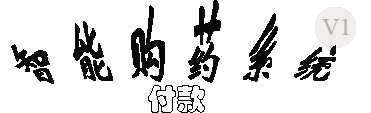
<style>
.page{position:relative;width:371px;height:113px;background:#ffffff}
.page>*{position:absolute;margin:0}
.t1{font:42px "STXinwei";color:#090808}
.t2{font:30px "STCaiyun";color:#090808}
</style>
<div class="page">
<p class="t1" style="left:11px;top:0px;width:325px;height:84px">智 能 购 药 系 统</p>
<p class="t2" style="left:148px;top:85px;width:57px;height:28px">付款</p>
</div>
